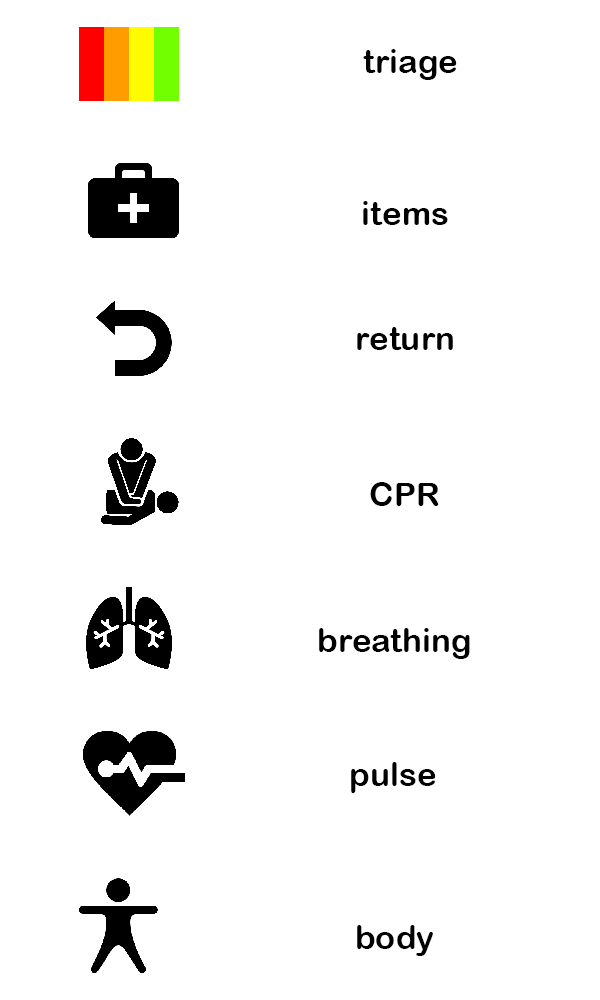
<style>
.page{position:relative;width:600px;height:1000px;background:#ffffff}
.page>*{position:absolute;margin:0}
.t1{font:33.3px "ArialRoundedMTBold";color:#000000}
</style>
<div class="page">
<p class="t1" style="left:363px;top:49px;width:94px;height:31px">triage</p>
<p class="t1" style="left:363px;top:201px;width:85px;height:24px">items</p>
<p class="t1" style="left:357px;top:327px;width:96px;height:23px">return</p>
<p class="t1" style="left:370px;top:482px;width:69px;height:24px">CPR</p>
<p class="t1" style="left:319px;top:628px;width:151px;height:31px">breathing</p>
<p class="t1" style="left:351px;top:762px;width:85px;height:31px">pulse</p>
<p class="t1" style="left:357px;top:925px;width:76px;height:31px">body</p>
</div>
